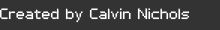
<style>
.page{position:relative;width:220px;height:30px;background:#333333}
.page>*{position:absolute;margin:0}
.t1{font:12px "PFTempestaSeven";color:#ffffff}
</style>
<div class="page">
<p class="t1" style="left:0px;top:8px;width:190px;height:15px">Created by Calvin Nichols</p>
</div>
